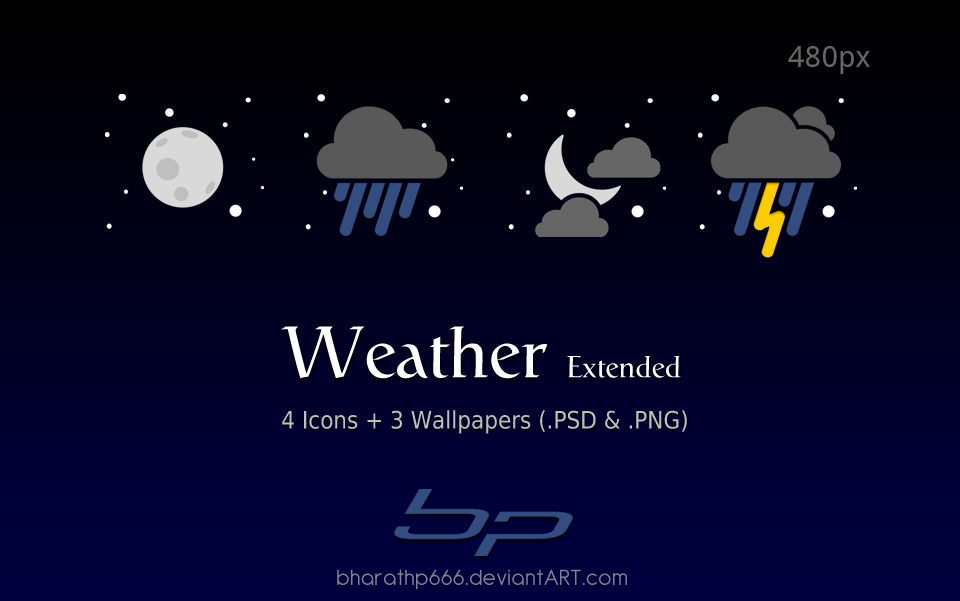
<style>
.page{position:relative;width:960px;height:601px}
.page>*{position:absolute;margin:0}
.t1{font:30px "DroidSans";color:#666666}
.t2{font:30px "Catull-Regular";color:#ffffff}
.t3{font:72px "Catull-Regular";color:#ffffff}
.t4{font:24px "DejaVuSansCondensed";color:#bfbfbf}
.t5{font:24px "Antipasto";letter-spacing:0.05em;color:#80809f}
</style>
<div class="page">
<p class="t1" style="left:788px;top:46px;width:82px;height:28px">480px</p>
<p class="t2" style="left:281px;top:326px;width:400px;height:53px"><span class="t3">Weather </span>Extended</p>
<p class="t4" style="left:282px;top:410px;width:405px;height:24px">4 Icons + 3 Wallpapers (.PSD &amp; .PNG)</p>
<p class="t5" style="left:337px;top:569px;width:290px;height:21px">bharathp666.deviantART.com</p>
</div>
